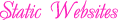
<style>
.page{position:relative;width:118px;height:20px;background:#ffffff}
.page>*{position:absolute;margin:0}
.t1{font:24px "UkrainianDecor";color:#fc24bc}
</style>
<div class="page">
<p class="t1" style="left:0px;top:0px;width:118px;height:21px">Static Websites</p>
</div>
